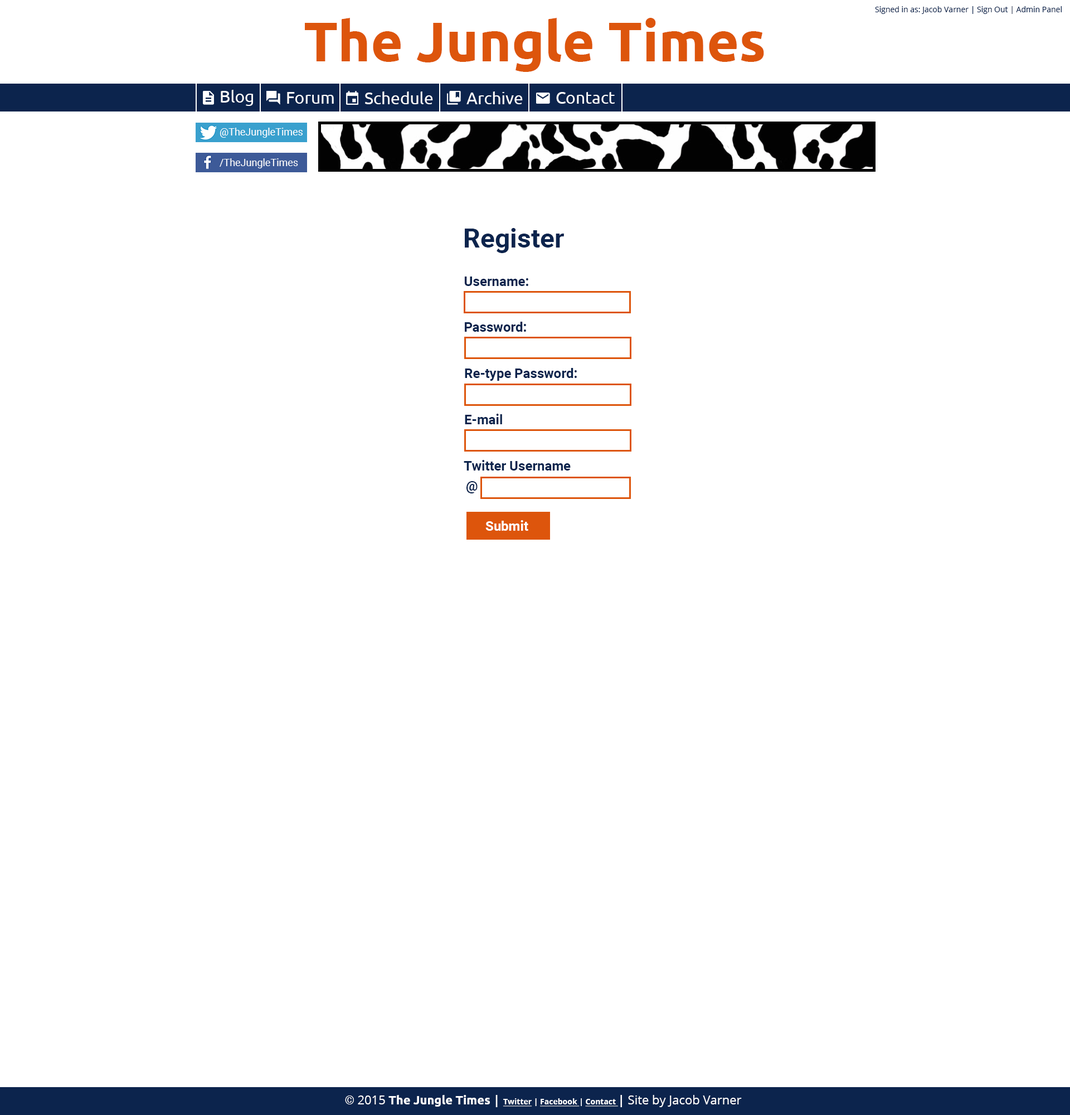
<style>
.page{position:relative;width:1070px;height:1115px;background:#ffffff}
.page>*{position:absolute;margin:0}
.t1{font:55.7px "Ubuntu-Bold";color:#dd550c}
.t2{font:7.8px "OpenSans";color:#0c244d}
.t3{font:16.7px "Ubuntu";color:#ffffff}
.t4{font:10px "Roboto-Regular";color:#ffffff}
.t5{font:26.7px "Roboto-Bold";color:#0c244d}
.t6{font:13.4px "Roboto-Bold";color:#0c244d}
.t7{font:13.4px "Roboto-Bold";color:#ffffff}
.t8{font:12.3px "OpenSans";color:#ffffff}
.t9{font:12.3px "Roboto-Bold";color:#ffffff}
.t10{font:12.3px "Ubuntu-Bold";color:#ffffff}
.t11{font:12.3px "OpenSans-Bold";color:#ffffff}
.t12{font:7.8px "OpenSans-Bold";color:#ffffff;text-decoration:underline}
.t13{font:7.8px "OpenSans-Bold";color:#ffffff}
</style>
<div class="page">
<p class="t1" style="left:305px;top:18px;width:459px;height:54px">The Jungle Times</p>
<p class="t2" style="left:875px;top:6px;width:187px;height:8px">Signed in as: Jacob Varner | Sign Out | Admin Panel</p>
<p class="t3" style="left:221px;top:90px;width:32px;height:16px">Blog</p>
<p class="t3" style="left:287px;top:92px;width:47px;height:12px">Forum</p>
<p class="t3" style="left:365px;top:91px;width:68px;height:13px">Schedule</p>
<p class="t3" style="left:466px;top:91px;width:57px;height:13px">Archive</p>
<p class="t3" style="left:556px;top:92px;width:59px;height:12px">Contact</p>
<p class="t4" style="left:220px;top:128px;width:83px;height:10px">@TheJungleTimes</p>
<p class="t4" style="left:220px;top:158px;width:78px;height:10px">/TheJungleTimes</p>
<p class="t5" style="left:465px;top:228px;width:99px;height:25px">Register</p>
<p class="t6" style="left:464px;top:276px;width:64px;height:10px">Username:</p>
<p class="t6" style="left:465px;top:322px;width:61px;height:10px">Password:</p>
<p class="t6" style="left:465px;top:368px;width:112px;height:13px">Re-type Password:</p>
<p class="t6" style="left:465px;top:413px;width:37px;height:11px">E-mail</p>
<p class="t6" style="left:464px;top:460px;width:107px;height:10px">Twitter Username</p>
<p class="t6" style="left:466px;top:481px;width:12px;height:12px">@</p>
<p class="t7" style="left:485px;top:520px;width:43px;height:11px">Submit</p>
<p class="t8" style="left:345px;top:1094px;width:397px;height:13px"><span class="t9">© </span>2015 <span class="t10">The Jungle Times </span><span class="t11">| </span><span class="t12">Twitter</span><span class="t13"> | </span><span class="t12">Facebook </span><span class="t13">| </span><span class="t12">Contact </span><span class="t11">| </span>Site by Jacob Varner</p>
</div>
